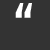
<style>
.page{position:relative;width:50px;height:50px;background:#333333}
.page>*{position:absolute;margin:0}
.t1{font:55px "Roboto-Medium";letter-spacing:0.05em;color:#ffffff}
</style>
<div class="page">
<p class="t1" style="left:15px;top:3px;width:17px;height:15px">“</p>
</div>
